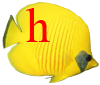
<style>
.page{position:relative;width:100px;height:85px;background:#ffffff}
.page>*{position:absolute;margin:0}
.t1{font:48px "TimesNewRomanPSMT";color:#ff0000}
</style>
<div class="page">
<p class="t1" style="left:26px;top:8px;width:24px;height:34px">h</p>
</div>
